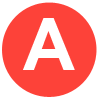
<style>
.page{position:relative;width:100px;height:100px;background:#fd4239}
.page>*{position:absolute;margin:0}
.t1{font:72px "Arial-BoldMT";color:#ffffff}
</style>
<div class="page">
<p class="t1" style="left:23px;top:18px;width:52px;height:52px">A</p>
</div>
